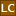
<style>
.page{position:relative;width:16px;height:16px;background:#975900}
.page>*{position:absolute;margin:0}
.t1{font:12px "LucidaConsole";color:#ffffff}
</style>
<div class="page">
<p class="t1" style="left:1px;top:4px;width:14px;height:8px">LC</p>
</div>
